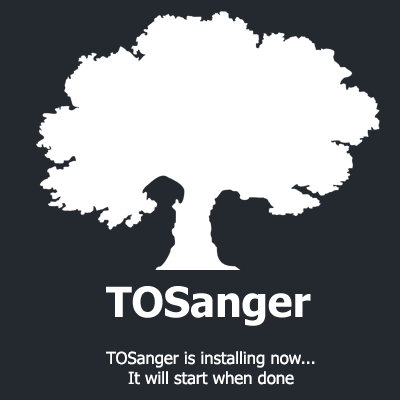
<style>
.page{position:relative;width:400px;height:400px;background:#242930}
.page>*{position:absolute;margin:0}
.t1{font:16.7px "Tahoma";color:#ffffff}
</style>
<div class="page">
<p class="t1" style="left:106px;top:351px;width:209px;height:34px;text-align:center">TOSanger is installing now...<br>It will start when done</p>
</div>
